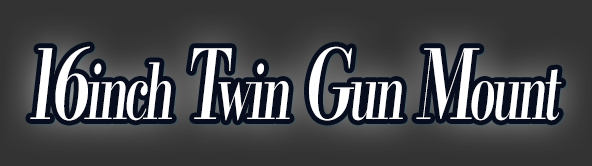
<style>
.page{position:relative;width:592px;height:166px;background:#333333}
.page>*{position:absolute;margin:0}
.t1{font:76.8px "KochoStd-Heavy";letter-spacing:-0.08em;color:#ffffff;font-style:italic;scale:0.63 1}
.t2{font:96px "KochoStd-Heavy";letter-spacing:-0.08em;color:#ffffff;font-style:italic;scale:0.63 1}
</style>
<div class="page">
<p class="t1" style="left:30px;top:46px;width:532px;height:75px"><span class="t2">16</span>inch<span class="t2"> T</span>win<span class="t2"> G</span>un<span class="t2"> M</span>ount</p>
</div>
